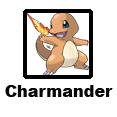
<style>
.page{position:relative;width:117px;height:117px;background:#ffffff}
.page>*{position:absolute;margin:0}
.t1{font:16px "Arial-Black";color:#050505}
</style>
<div class="page">
<p class="t1" style="left:5px;top:85px;width:108px;height:12px">Charmander</p>
</div>
